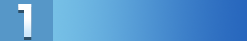
<style>
.page{position:relative;width:247px;height:41px}
.page>*{position:absolute;margin:0}
.t1{font:40px "GmarketSansTTFBold";letter-spacing:-0.075em;color:#ffffff}
</style>
<div class="page">
<p class="t1" style="left:18px;top:4px;width:14px;height:33px">1</p>
</div>
